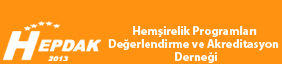
<style>
.page{position:relative;width:282px;height:64px;background:#ff9311}
.page>*{position:absolute;margin:0}
.t1{font:12px/13.2px "MyriadPro-Bold";color:#ffffff}
</style>
<div class="page">
<p class="t1" style="left:108px;top:26px;width:171px;height:37px;text-align:center">Hemşirelik Programları <br>Değerlendirme ve Akreditasyon  <br>Derneği</p>
</div>
